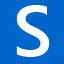
<style>
.page{position:relative;width:64px;height:64px;background:#0066cc}
.page>*{position:absolute;margin:0}
.t1{font:72px "SegoeUI-SemiBold";letter-spacing:-0.025em;color:#fefefe}
</style>
<div class="page">
<p class="t1" style="left:16px;top:5px;width:34px;height:52px">S</p>
</div>
